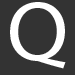
<style>
.page{position:relative;width:75px;height:75px;background:#333333}
.page>*{position:absolute;margin:0}
.t1{font:84.2px "MyriadPro-Regular";color:#ffffff;scale:1.05 1}
</style>
<div class="page">
<p class="t1" style="left:10px;top:2px;width:56px;height:67px">Q</p>
</div>
